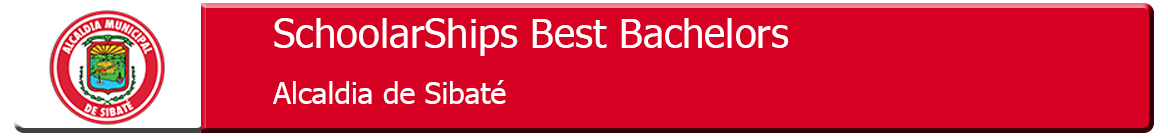
<style>
.page{position:relative;width:1168px;height:139px;background:#d50022}
.page>*{position:absolute;margin:0}
.t1{font:40px "Tahoma";color:#ffffff}
.t2{font:30px "Tahoma";color:#ffffff}
</style>
<div class="page">
<p class="t1" style="left:274px;top:18px;width:515px;height:38px">SchoolarShips Best Bachelors</p>
<p class="t2" style="left:273px;top:80px;width:233px;height:24px">Alcaldia de Sibaté</p>
</div>
